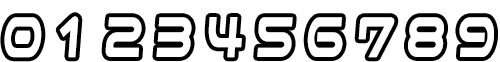
<style>
.page{position:relative;width:500px;height:62px;background:#ffffff}
.page>*{position:absolute;margin:0}
.t1{font:69.1px "NicoKaku";letter-spacing:0.2em;color:#ffffff;scale:0.74 1}
</style>
<div class="page">
<p class="t1" style="left:4px;top:16px;width:490px;height:42px">0123456789</p>
</div>
